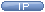
<style>
.page{position:relative;width:45px;height:12px;background:#ffffff}
.page>*{position:absolute;margin:0}
.t1{font:9px "Small Fonts";color:#ffffff}
</style>
<div class="page">
<p class="t1" style="left:19px;top:3px;width:10px;height:7px">I P</p>
</div>
